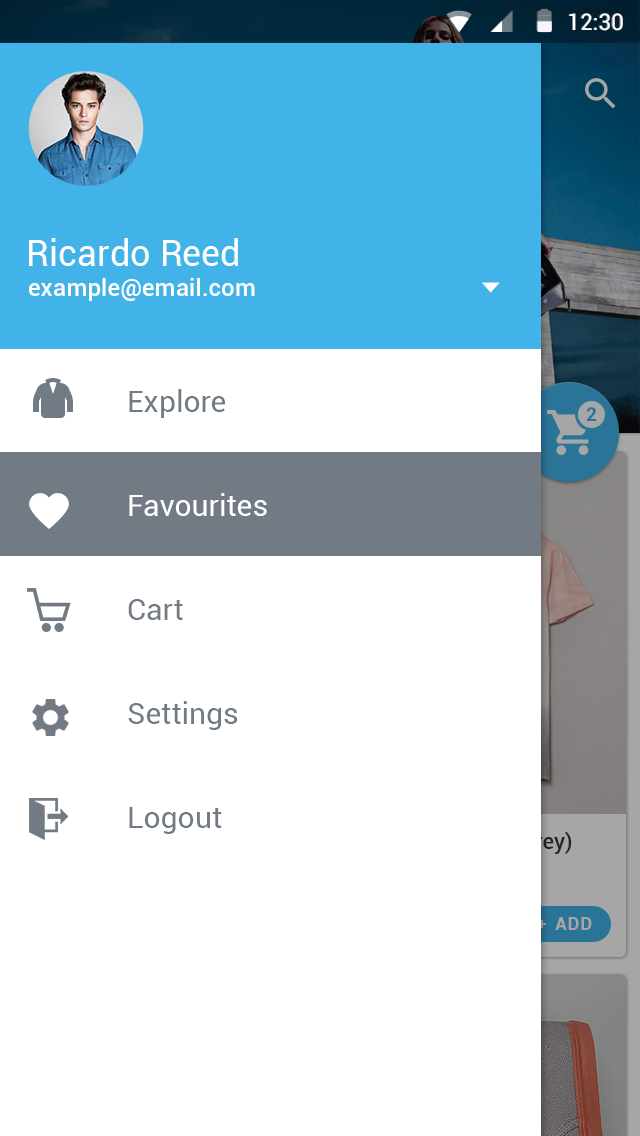
<style>
.page{position:relative;width:640px;height:1136px;background:#ffffff}
.page>*{position:absolute;margin:0}
.t1{font:22.6px "Roboto-Regular";color:#ffffff}
.t2{font:36px "Roboto-Regular";color:#ffffff}
.t3{font:24.4px "Roboto-Medium";color:#ffffff}
.t4{font:30px "Roboto-Regular";color:#727a84}
.t5{font:30px "Roboto-Regular";color:#ffffff}
</style>
<div class="page">
<p class="t1" style="left:569px;top:13px;width:54px;height:18px">12:30</p>
<p class="t2" style="left:29px;top:238px;width:209px;height:28px">Ricardo Reed</p>
<p class="t3" style="left:29px;top:278px;width:226px;height:23px">example@email.com</p>
<p class="t4" style="left:129px;top:389px;width:97px;height:29px">Explore</p>
<p class="t5" style="left:129px;top:493px;width:138px;height:23px">Favourites</p>
<p class="t4" style="left:128px;top:599px;width:55px;height:21px">Cart</p>
<p class="t4" style="left:128px;top:701px;width:110px;height:29px">Settings</p>
<p class="t4" style="left:129px;top:807px;width:93px;height:27px">Logout</p>
</div>
